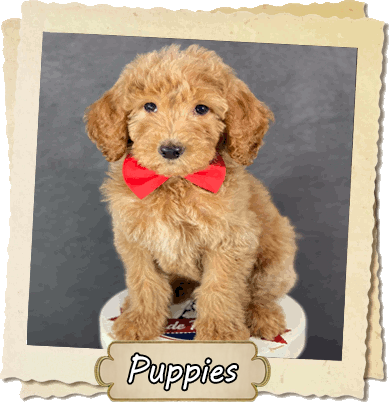
<style>
.page{position:relative;width:389px;height:402px}
.page>*{position:absolute;margin:0}
.t1{font:34.2px "MVBoli";color:#ffffff;scale:0.92 1}
</style>
<div class="page">
<p class="t1" style="left:128px;top:354px;width:109px;height:36px">Puppies</p>
</div>
